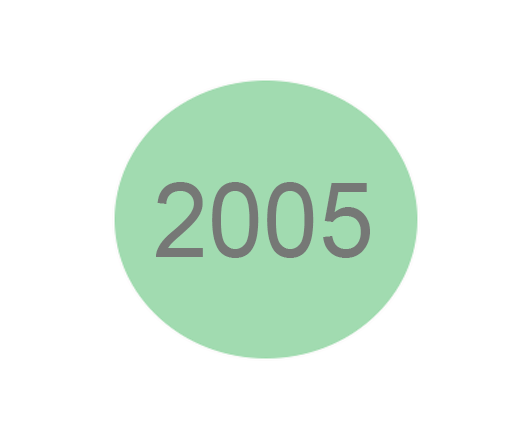
<style>
.page{position:relative;width:519px;height:433px;background:#ffffff}
.page>*{position:absolute;margin:0}
.t1{font:104.8px "ArialMT";color:#767876;scale:0.95 1}
</style>
<div class="page">
<p class="t1" style="left:156px;top:182px;width:214px;height:76px">2005</p>
</div>
